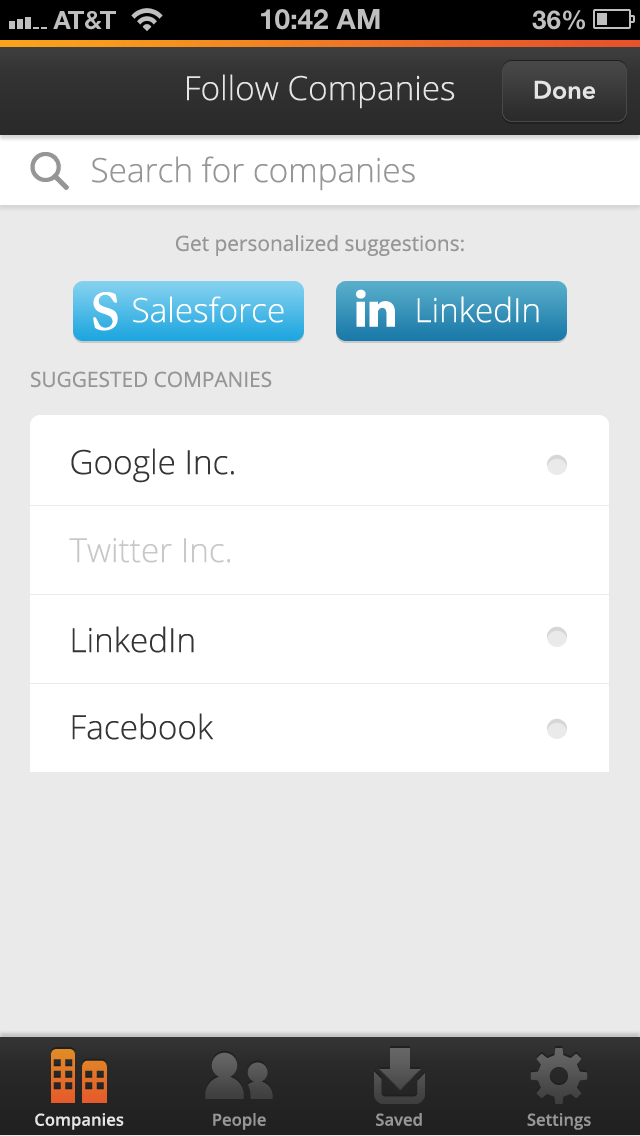
<style>
.page{position:relative;width:640px;height:1136px;background:#eaeaea}
.page>*{position:absolute;margin:0}
.t1{font:33.3px "OpenSans-Light";color:#e5e5e5}
.t2{font:25px "AvenirNext-DemiBold";color:#e5e5e5}
.t3{font:33.3px "OpenSans-Light";color:#969696}
.t4{font:20.8px "OpenSans";color:#969696}
.t5{font:33.3px "OpenSans-Light";color:#ffffff}
.t6{font:33.3px "OpenSans-Light";color:#343434}
.t7{font:33.3px "OpenSans-Light";color:#c8c8c8}
.t8{font:16.7px "OpenSans-Semibold";color:#e5e5e5}
.t9{font:16.7px "OpenSans-Semibold";color:#969696}
</style>
<div class="page">
<p class="t1" style="left:187px;top:74px;width:268px;height:35px">Follow Companies</p>
<p class="t2" style="left:534px;top:80px;width:61px;height:19px">Done</p>
<p class="t3" style="left:92px;top:156px;width:323px;height:35px">Search for companies</p>
<p class="t4" style="left:176px;top:235px;width:288px;height:21px">Get personalized suggestions:</p>
<p class="t5" style="left:133px;top:296px;width:151px;height:27px">Salesforce</p>
<p class="t5" style="left:417px;top:296px;width:122px;height:27px">LinkedIn</p>
<p class="t4" style="left:31px;top:371px;width:241px;height:17px">SUGGESTED COMPANIES</p>
<p class="t6" style="left:71px;top:448px;width:163px;height:35px">Google Inc.</p>
<p class="t7" style="left:69px;top:537px;width:161px;height:26px">Twitter Inc.</p>
<p class="t6" style="left:72px;top:626px;width:122px;height:27px">LinkedIn</p>
<p class="t6" style="left:72px;top:713px;width:142px;height:27px">Facebook</p>
<p class="t8" style="left:35px;top:1113px;width:89px;height:17px">Companies</p>
<p class="t9" style="left:213px;top:1113px;width:53px;height:17px">People</p>
<p class="t9" style="left:376px;top:1113px;width:46px;height:13px">Saved</p>
<p class="t9" style="left:527px;top:1113px;width:64px;height:17px">Settings</p>
</div>
